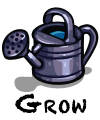
<style>
.page{position:relative;width:100px;height:120px;background:#ffffff}
.page>*{position:absolute;margin:0}
.t1{font:24px "Chalkduster";letter-spacing:0.05em;color:#000000;font-variant:small-caps;font-weight:bold}
</style>
<div class="page">
<p class="t1" style="left:15px;top:93px;width:72px;height:22px">Grow</p>
</div>
